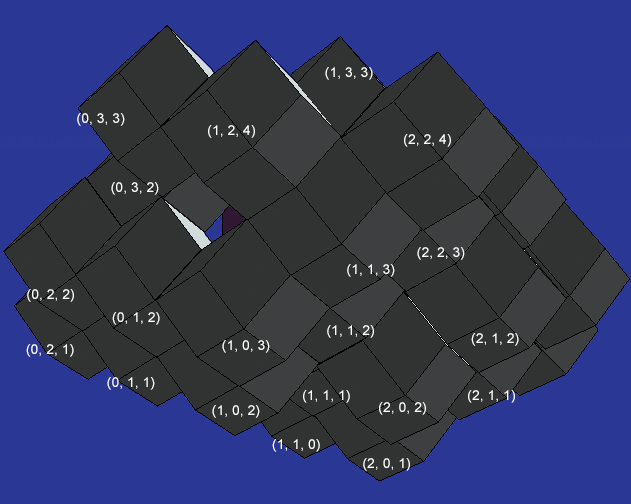
<style>
.page{position:relative;width:631px;height:504px;background:#2b3794}
.page>*{position:absolute;margin:0}
.t1{font:14px "ArialMT";color:#ffffff}
</style>
<div class="page">
<p class="t1" style="left:325px;top:67px;width:48px;height:13px">(1, 3, 3)</p>
<p class="t1" style="left:77px;top:113px;width:48px;height:13px">(0, 3, 3)</p>
<p class="t1" style="left:208px;top:125px;width:47px;height:13px">(1, 2, 4)</p>
<p class="t1" style="left:404px;top:134px;width:47px;height:13px">(2, 2, 4)</p>
<p class="t1" style="left:111px;top:182px;width:48px;height:13px">(0, 3, 2)</p>
<p class="t1" style="left:417px;top:247px;width:48px;height:13px">(2, 2, 3)</p>
<p class="t1" style="left:347px;top:264px;width:48px;height:13px">(1, 1, 3)</p>
<p class="t1" style="left:27px;top:289px;width:47px;height:13px">(0, 2, 2)</p>
<p class="t1" style="left:112px;top:312px;width:48px;height:13px">(0, 1, 2)</p>
<p class="t1" style="left:327px;top:325px;width:47px;height:13px">(1, 1, 2)</p>
<p class="t1" style="left:222px;top:340px;width:48px;height:13px">(1, 0, 3)</p>
<p class="t1" style="left:471px;top:333px;width:48px;height:13px">(2, 1, 2)</p>
<p class="t1" style="left:26px;top:344px;width:48px;height:13px">(0, 2, 1)</p>
<p class="t1" style="left:107px;top:377px;width:48px;height:13px">(0, 1, 1)</p>
<p class="t1" style="left:303px;top:390px;width:47px;height:13px">(1, 1, 1)</p>
<p class="t1" style="left:468px;top:390px;width:47px;height:13px">(2, 1, 1)</p>
<p class="t1" style="left:212px;top:405px;width:48px;height:13px">(1, 0, 2)</p>
<p class="t1" style="left:379px;top:402px;width:47px;height:13px">(2, 0, 2)</p>
<p class="t1" style="left:272px;top:439px;width:48px;height:13px">(1, 1, 0)</p>
<p class="t1" style="left:363px;top:458px;width:47px;height:13px">(2, 0, 1)</p>
</div>
